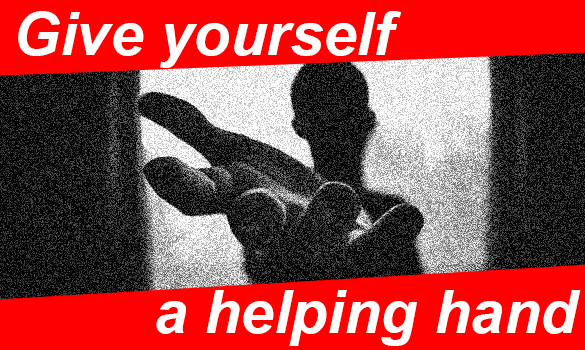
<style>
.page{position:relative;width:585px;height:350px;background:#ff0000}
.page>*{position:absolute;margin:0}
.t1{font:60px "Arial-BoldItalicMT";color:#ffffff}
</style>
<div class="page">
<p class="t1" style="left:18px;top:11px;width:383px;height:57px">Give yourself</p>
<p class="t1" style="left:156px;top:290px;width:425px;height:56px">a helping hand</p>
</div>
